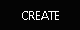
<style>
.page{position:relative;width:80px;height:30px;background:#040404}
.page>*{position:absolute;margin:0}
.t1{font:13.3px "SegoeUI";color:#ffffff;scale:0.89 1}
</style>
<div class="page">
<p class="t1" style="left:22px;top:11px;width:37px;height:9px">CREATE</p>
</div>
